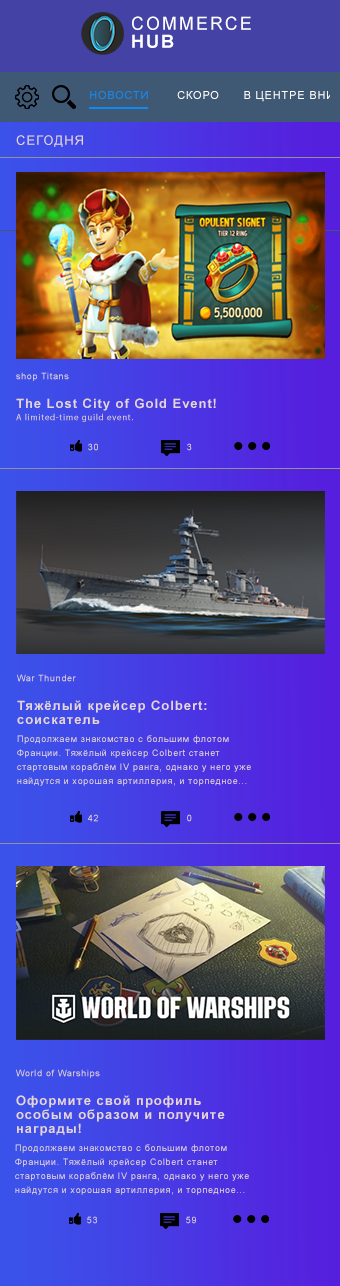
<style>
.page{position:relative;width:340px;height:1286px}
.page>*{position:absolute;margin:0}
.t1{font:18px/18px "ArialMT";letter-spacing:0.075em;color:#ffffff;text-transform:uppercase}
.t2{font:18px/18px "Arial-BoldMT";letter-spacing:0.075em;color:#ffffff;text-transform:uppercase}
.t3{font:11px "ArialMT";letter-spacing:0.075em;color:#0d8af4}
.t4{font:11px "ArialMT";letter-spacing:0.075em;color:#ffffff}
.t5{font:13px "ArialMT";letter-spacing:0.075em;color:#e5d5d5}
.t6{font:9px "ArialMT";letter-spacing:0.075em;color:#e5d5d5}
.t7{font:13px "Arial-BoldMT";letter-spacing:0.075em;color:#e5d5d5}
.t8{font:9px "MyriadPro-Regular";letter-spacing:0.075em;color:#e5d5d5}
.t9{font:9px "ArialMT";letter-spacing:0.075em}
.t10{font:13px/14px "Arial-BoldMT";letter-spacing:0.075em;color:#e5d5d5}
.t11{font:9px/14px "ArialMT";letter-spacing:0.075em;color:#e5d5d5}
</style>
<div class="page">
<p class="t1" style="left:132px;top:16px;width:119px;height:32px">Commerce<br><span class="t2">Hub</span></p>
<p class="t3" style="left:90px;top:91px;width:58px;height:8px">НОВОСТИ</p>
<p class="t4" style="left:177px;top:91px;width:42px;height:8px">СКОРО</p>
<p class="t5" style="left:16px;top:135px;width:67px;height:12px">СЕГОДНЯ</p>
<p class="t6" style="left:16px;top:372px;width:53px;height:9px">shop Titans</p>
<p class="t7" style="left:16px;top:398px;width:200px;height:13px"><span class="t6"> </span>The Lost City of Gold Event!</p>
<p class="t8" style="left:16px;top:413px;width:117px;height:9px">A limited-time guild event.</p>
<p class="t9" style="left:88px;top:443px;width:10px;height:8px">30</p>
<p class="t9" style="left:187px;top:443px;width:5px;height:8px">3</p>
<p class="t6" style="left:17px;top:674px;width:59px;height:8px">War Thunder</p>
<p class="t10" style="left:17px;top:700px;width:190px;height:24px">Тяжёлый крейсер Colbert: соискатель</p>
<p class="t11" style="left:17px;top:735px;width:234px;height:51px">Продолжаем знакомство с большим флотом Франции. Тяжёлый крейсер Colbert станет стартовым кораблём IV ранга, однако у него уже найдутся и хорошая артиллерия, и торпедное...</p>
<p class="t6" style="left:88px;top:814px;width:10px;height:8px">42</p>
<p class="t9" style="left:187px;top:814px;width:5px;height:8px">0</p>
<p class="t6" style="left:16px;top:1069px;width:84px;height:9px">World of Warships</p>
<p class="t10" style="left:16px;top:1095px;width:209px;height:41px">Оформите свой профиль особым образом и получите награды!</p>
<p class="t11" style="left:15px;top:1144px;width:234px;height:51px">Продолжаем знакомство с большим флотом Франции. Тяжёлый крейсер Colbert станет стартовым кораблём IV ранга, однако у него уже найдутся и хорошая артиллерия, и торпедное...</p>
<p class="t9" style="left:87px;top:1216px;width:10px;height:8px">53</p>
<p class="t6" style="left:186px;top:1216px;width:10px;height:8px">59</p>
</div>
